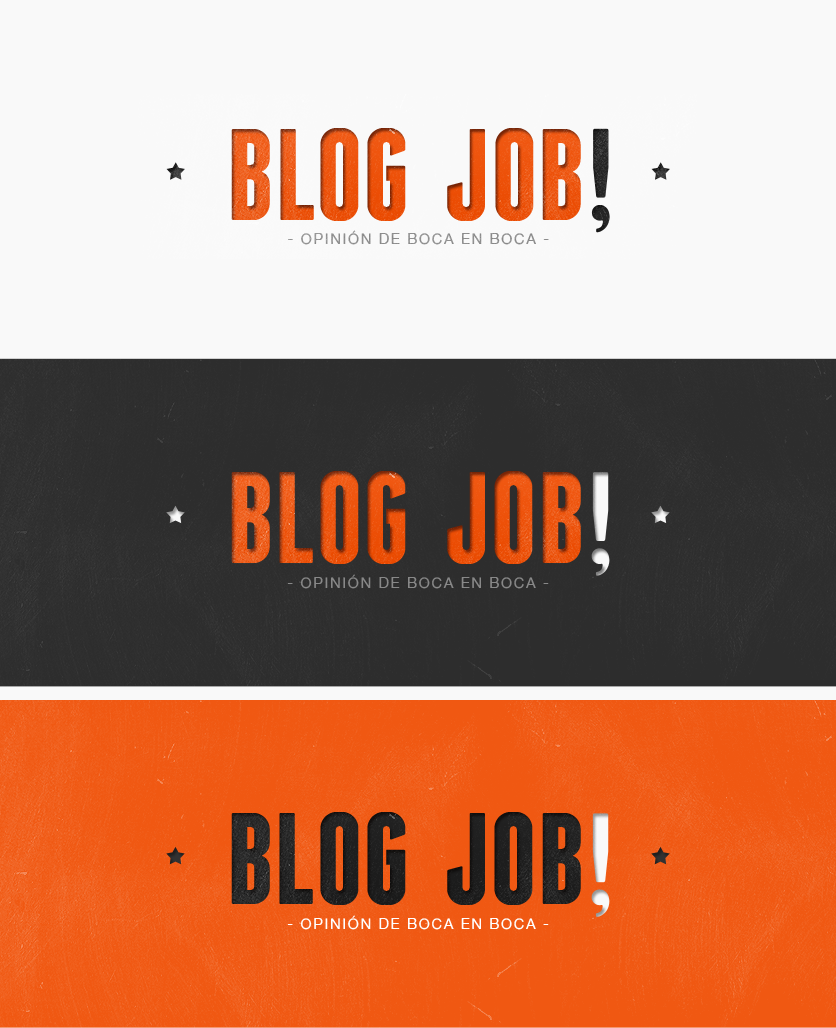
<style>
.page{position:relative;width:836px;height:1028px;background:#f9f9f9}
.page>*{position:absolute;margin:0}
.t1{font:130px "Franchise-Bold";color:#f05812}
.t2{font:14.5px "AlteHaasGrotesk";letter-spacing:0.12em;color:#888888}
.t3{font:130px "Franchise-Bold";color:#202020}
.t4{font:14.5px "AlteHaasGrotesk";letter-spacing:0.12em;color:#ffffff}
</style>
<div class="page">
<p class="t1" style="left:231px;top:128px;width:350px;height:93px">BLOG  JOB</p>
<p class="t2" style="left:288px;top:230px;width:261px;height:15px">- OPINIÓN DE BOCA EN BOCA -</p>
<p class="t1" style="left:231px;top:471px;width:350px;height:93px">BLOG  JOB</p>
<p class="t2" style="left:287px;top:574px;width:262px;height:15px">- OPINIÓN DE BOCA EN BOCA -</p>
<p class="t3" style="left:231px;top:812px;width:350px;height:93px">BLOG  JOB</p>
<p class="t4" style="left:287px;top:915px;width:262px;height:15px">- OPINIÓN DE BOCA EN BOCA -</p>
</div>
